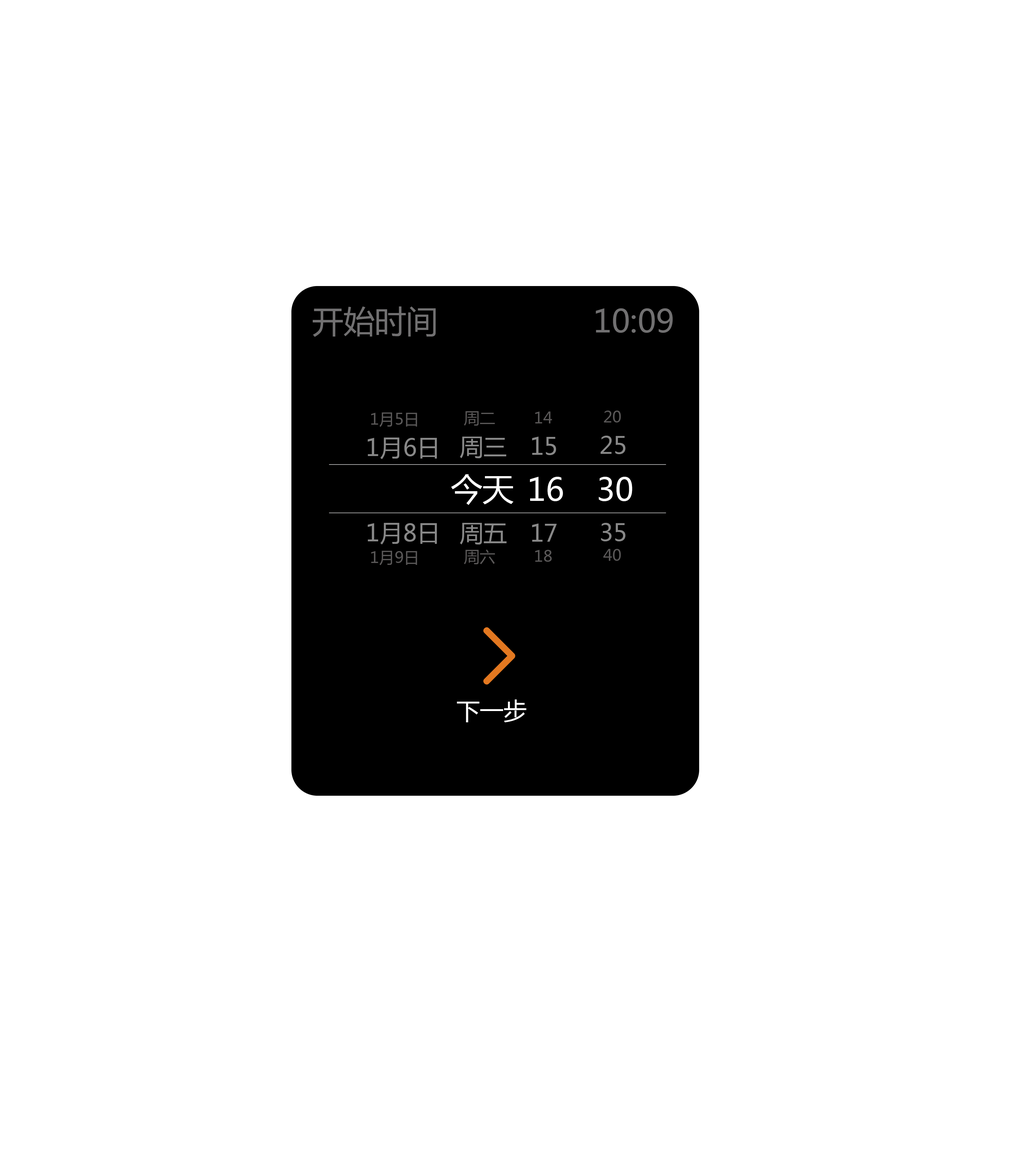
<style>
.page{position:relative;width:1026px;height:1163px;background:#ffffff}
.page>*{position:absolute;margin:0}
.t1{font:31.4px "MicrosoftYaHei";color:#717071}
.t2{font:15.7px "MicrosoftYaHei";color:#595757}
.t3{font:23.5px "MicrosoftYaHei";color:#888888}
.t4{font:31.4px "MicrosoftYaHei";color:#ffffff}
.t5{font:23.5px "MicrosoftYaHei";color:#ffffff}
</style>
<div class="page">
<p class="t1" style="left:313px;top:306px;width:123px;height:31px">开始时间</p>
<p class="t1" style="left:595px;top:308px;width:78px;height:25px">10:09</p>
<p class="t2" style="left:371px;top:412px;width:46px;height:15px">1月5日</p>
<p class="t2" style="left:464px;top:411px;width:31px;height:14px">周二</p>
<p class="t2" style="left:535px;top:411px;width:17px;height:12px">14</p>
<p class="t2" style="left:604px;top:410px;width:17px;height:12px">20</p>
<p class="t3" style="left:367px;top:437px;width:70px;height:22px">1月6日</p>
<p class="t3" style="left:460px;top:436px;width:46px;height:22px">周三</p>
<p class="t3" style="left:532px;top:436px;width:24px;height:19px">15</p>
<p class="t3" style="left:600px;top:436px;width:25px;height:18px">25</p>
<p class="t4" style="left:451px;top:474px;width:62px;height:31px">今天</p>
<p class="t4" style="left:530px;top:477px;width:33px;height:24px">16</p>
<p class="t4" style="left:599px;top:477px;width:33px;height:24px">30</p>
<p class="t3" style="left:367px;top:523px;width:70px;height:21px">1月8日</p>
<p class="t3" style="left:460px;top:523px;width:46px;height:21px">周五</p>
<p class="t3" style="left:532px;top:523px;width:25px;height:19px">17</p>
<p class="t3" style="left:601px;top:523px;width:24px;height:18px">35</p>
<p class="t2" style="left:371px;top:551px;width:46px;height:14px">1月9日</p>
<p class="t2" style="left:464px;top:549px;width:31px;height:15px">周六</p>
<p class="t2" style="left:535px;top:550px;width:17px;height:12px">18</p>
<p class="t2" style="left:603px;top:549px;width:18px;height:12px">40</p>
<p class="t5" style="left:457px;top:699px;width:69px;height:23px">下一步</p>
</div>
